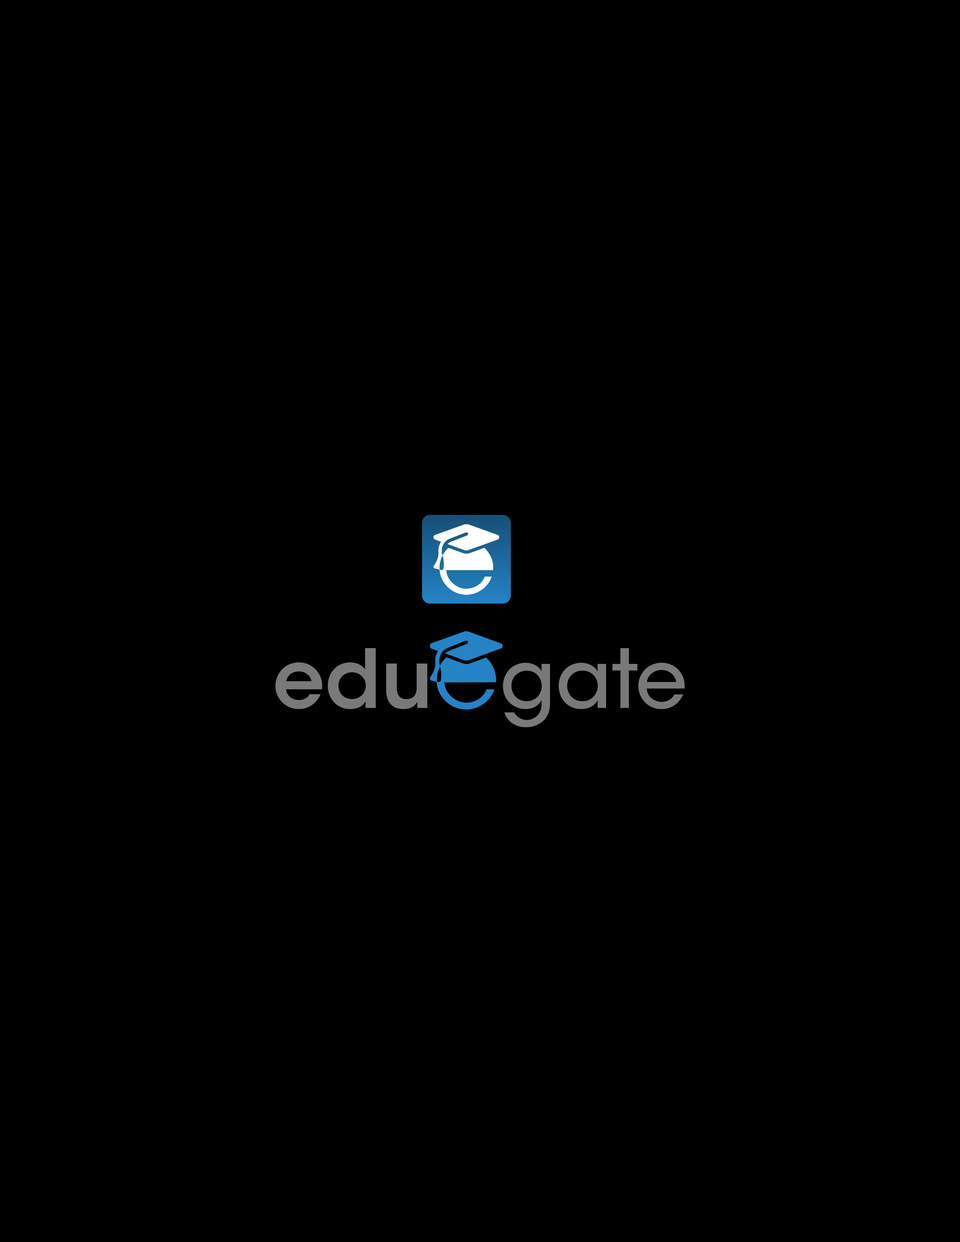
<style>
.page{position:relative;width:960px;height:1242px;background:#000000}
.page>*{position:absolute;margin:0}
.t1{font:81px "ITCAvantGardeStd-Md";color:#676767}
.t2{font:81px "ITCAvantGardeStd-Demi";color:#676767}
.t3{font:103.8px "AvantGardeLT-Book";color:#231f20}
</style>
<div class="page">
<p class="t1" style="left:275px;top:648px;width:410px;height:80px"><span class="t2">edu</span><span class="t3">e</span>gate</p>
</div>
